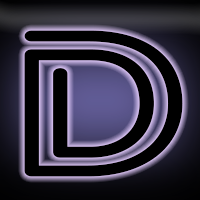
<style>
.page{position:relative;width:200px;height:200px;background:#000000}
.page>*{position:absolute;margin:0}
.t1{font:190.3px "LIBRARY3AMsoft";color:#000000;font-weight:bold;scale:1.43 1}
</style>
<div class="page">
<p class="t1" style="left:24px;top:30px;width:159px;height:147px">D</p>
</div>
